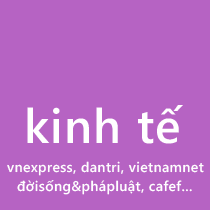
<style>
.page{position:relative;width:210px;height:210px;background:#b663c3}
.page>*{position:absolute;margin:0}
.t1{font:48px "SegoeWP-Semibold";letter-spacing:0.025em;color:#ffffff}
.t2{font:14px "SegoeWP-Semibold";letter-spacing:0.025em;color:#fefefe}
.t3{font:14px "SegoeWP-Semibold";letter-spacing:0.025em;color:#ffffff}
</style>
<div class="page">
<p class="t1" style="left:27px;top:105px;width:156px;height:39px">kinh tế</p>
<p class="t2" style="left:7px;top:161px;width:197px;height:15px">vnexpress, dantri, vietnamnet</p>
<p class="t3" style="left:17px;top:180px;width:175px;height:15px">đờisống&amp;phápluật, cafef...</p>
</div>
